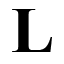
<style>
.page{position:relative;width:64px;height:64px;background:#ffffff}
.page>*{position:absolute;margin:0}
.t1{font:64.5px "TimesNewRomanPS-BoldMT";color:#000000}
</style>
<div class="page">
<p class="t1" style="left:12px;top:9px;width:40px;height:43px">L</p>
</div>
